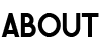
<style>
.page{position:relative;width:100px;height:50px;background:#ffffff}
.page>*{position:absolute;margin:0}
.t1{font:33.3px "SUNDAYPersonaluse";color:#000000}
</style>
<div class="page">
<p class="t1" style="left:1px;top:13px;width:98px;height:24px">ABOUT</p>
</div>
